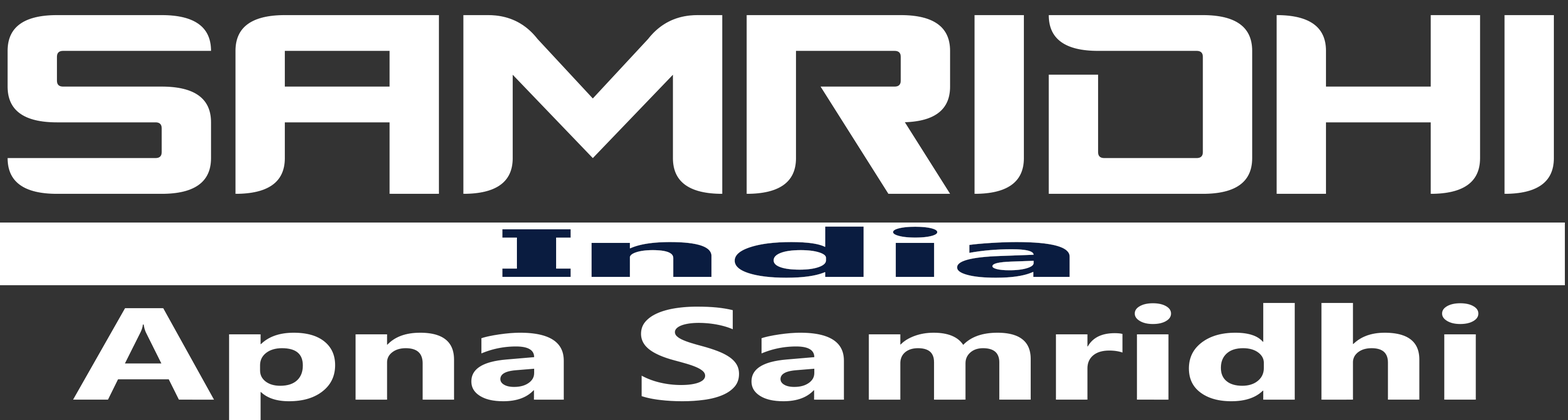
<style>
.page{position:relative;width:1568px;height:420px;background:#333333}
.page>*{position:absolute;margin:0}
.t1{font:244.1px "Cyberverse";color:#ffffff;scale:1.03 1}
.t2{font:68.2px "Ebrima-Bold";color:#0a1c40;scale:3.64 1}
</style>
<div class="page">
<p class="t1" style="left:7px;top:15px;width:1547px;height:179px">SAMRIDHI</p>
<p class="t2" style="left:502px;top:226px;width:568px;height:52px">India</p>
</div>
